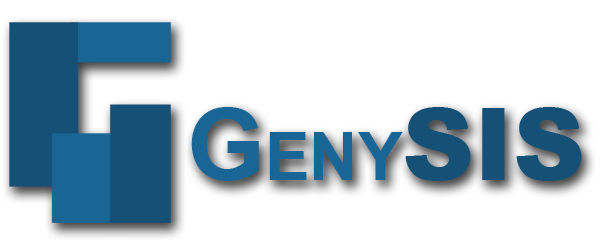
<style>
.page{position:relative;width:600px;height:250px;background:#ffffff}
.page>*{position:absolute;margin:0}
.t1{font:67.1px "Arial-BoldMT";color:#186596}
.t2{font:99.6px "Arial-BoldMT";color:#186596}
.t3{font:99.6px "Arial-Black";color:#155076}
</style>
<div class="page">
<p class="t1" style="left:191px;top:107px;width:391px;height:74px"><span class="t2">G</span>ENY<span class="t3">SIS</span></p>
</div>
